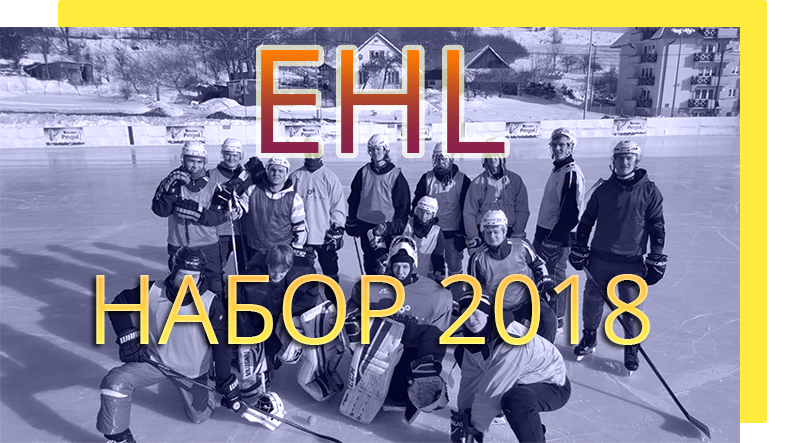
<style>
.page{position:relative;width:793px;height:443px}
.page>*{position:absolute;margin:0}
.t1{font:144px "OpenSans-Regular";text-transform:uppercase}
.t2{font:96px "OpenSans-Regular";text-transform:uppercase}
</style>
<div class="page">
<p class="t1" style="left:261px;top:50px;width:244px;height:103px">ehl</p>
<p class="t2" style="left:96px;top:274px;width:554px;height:71px">набор 2018</p>
</div>
